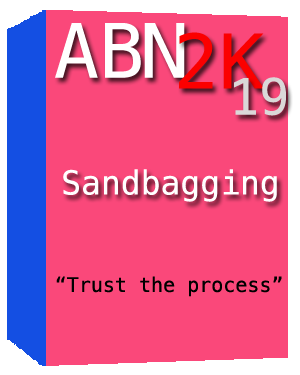
<style>
.page{position:relative;width:300px;height:375px;background:#fa487a}
.page>*{position:absolute;margin:0}
.t1{font:75px "Menlo-Regular";color:#ffffff}
.t2{font:75px "Menlo-Regular";color:#fb0000}
.t3{font:50px "Menlo-Regular";color:#dad8d8}
.t4{font:33px "Menlo-Regular";color:#ffffff}
.t5{font:20px "Menlo-Regular";color:#000000}
</style>
<div class="page">
<p class="t1" style="left:55px;top:23px;width:130px;height:55px">ABN</p>
<p class="t2" style="left:179px;top:32px;width:85px;height:57px">2K</p>
<p class="t3" style="left:234px;top:77px;width:52px;height:39px">19</p>
<p class="t4" style="left:63px;top:169px;width:214px;height:33px">Sandbagging</p>
<p class="t5" style="left:56px;top:276px;width:226px;height:21px">“Trust the process”</p>
</div>
